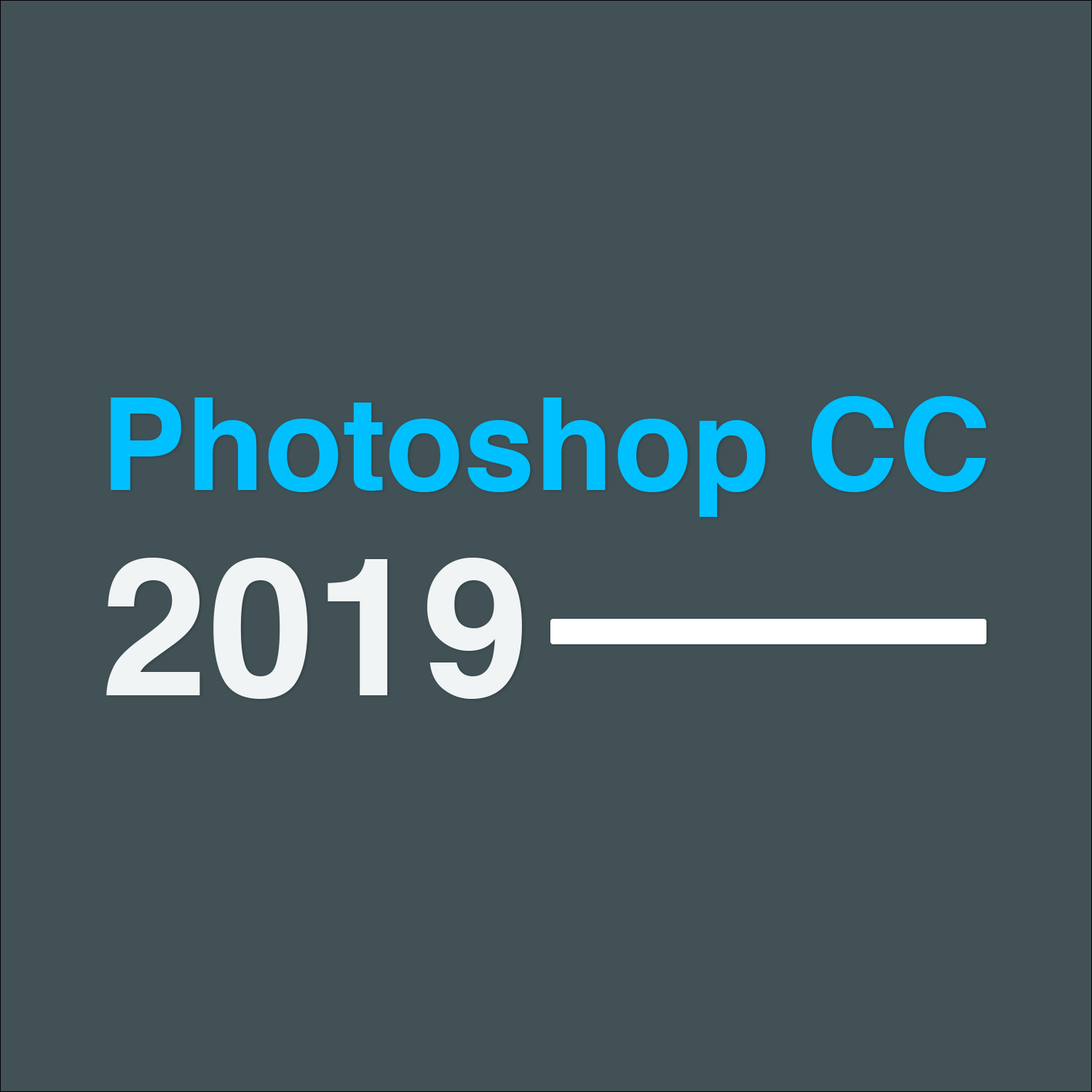
<style>
.page{position:relative;width:1092px;height:1092px;background:#415156}
.page>*{position:absolute;margin:0}
.t1{font:128.2px/205.2px "Helvetica-Bold";color:#01c0ff}
.t2{font:192.4px/205.2px "Helvetica-Bold";color:#f0f4f5}
</style>
<div class="page">
<p class="t1" style="left:106px;top:396px;width:880px;height:303px">Photoshop CC<br><span class="t2">2019</span></p>
</div>
